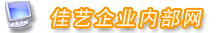
<style>
.page{position:relative;width:216px;height:33px;background:#ffffff}
.page>*{position:absolute;margin:0}
.t1{font:20px "SimHei";letter-spacing:0.1em;color:#ffffff;font-style:italic}
</style>
<div class="page">
<p class="t1" style="left:51px;top:8px;width:151px;height:20px">佳艺企业内部网</p>
</div>
